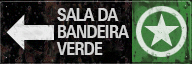
<style>
.page{position:relative;width:192px;height:64px}
.page>*{position:absolute;margin:0}
.t1{font:18px/17px "UniversNextPro-Bold";letter-spacing:-0.02em;color:#d3d3d2;scale:0.75 1}
</style>
<div class="page">
<p class="t1" style="left:56px;top:8px;width:73px;height:47px">SALA DA<br>BANDEIRA<br>VERDE</p>
</div>
